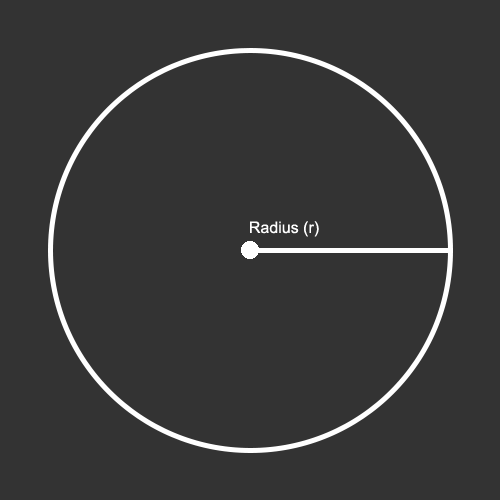
<style>
.page{position:relative;width:500px;height:500px;background:#333333}
.page>*{position:absolute;margin:0}
.t1{font:16px "ArialMT";color:#ffffff}
</style>
<div class="page">
<p class="t1" style="left:250px;top:221px;width:69px;height:16px">Radius (r)</p>
</div>
